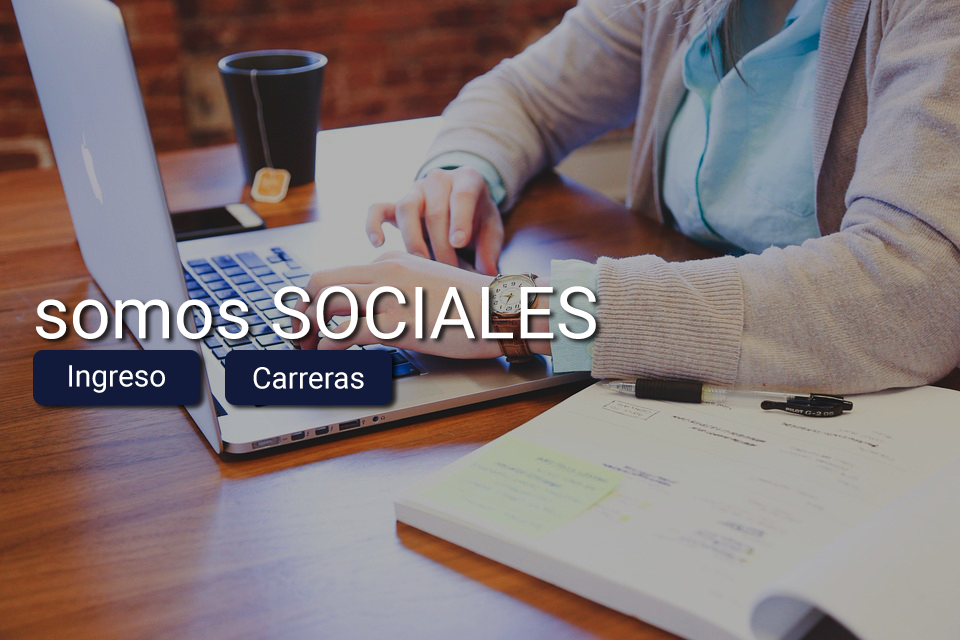
<style>
.page{position:relative;width:960px;height:640px}
.page>*{position:absolute;margin:0}
.t1{font:72px "Roboto-Regular";color:#ffffff}
.t2{font:30px "Roboto-Regular";color:#ffffff}
</style>
<div class="page">
<p class="t1" style="left:36px;top:286px;width:560px;height:53px">somos SOCIALES</p>
<p class="t2" style="left:69px;top:365px;width:96px;height:28px">Ingreso</p>
<p class="t2" style="left:253px;top:367px;width:111px;height:22px">Carreras</p>
</div>
